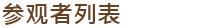
<style>
.page{position:relative;width:223px;height:28px;background:#ffffff}
.page>*{position:absolute;margin:0}
.t1{font:24px "MicrosoftJhengHeiBold";color:#684121}
</style>
<div class="page">
<p class="t1" style="left:2px;top:3px;width:118px;height:22px">参观者列表</p>
</div>
